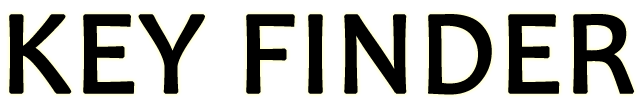
<style>
.page{position:relative;width:641px;height:107px;background:#ffffff}
.page>*{position:absolute;margin:0}
.t1{font:119.6px "Candara";color:#000000;font-weight:bold}
</style>
<div class="page">
<p class="t1" style="left:9px;top:14px;width:626px;height:81px">KEY FINDER</p>
</div>
